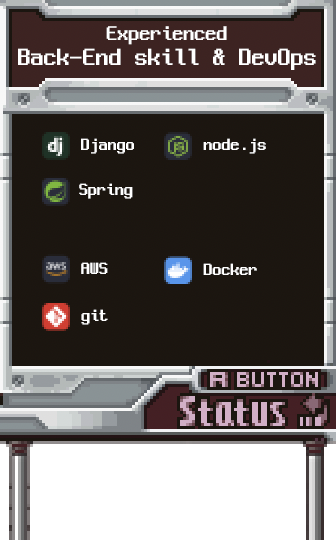
<style>
.page{position:relative;width:336px;height:540px}
.page>*{position:absolute;margin:0}
.t1{font:26px/30px "NeoDunggeunmo-Regular";color:#ffffff}
.t2{font:22px/22px "NeoDunggeunmo-Regular";color:#ffffff}
.t3{font:18px "NeoDunggeunmo-Regular";color:#ffffff}
</style>
<div class="page">
<p class="t1" style="left:18px;top:26px;width:298px;height:44px;text-align:center"><span class="t2">Experienced<br></span>Back-End skill &amp; DevOps</p>
<p class="t3" style="left:81px;top:138px;width:53px;height:16px">Django</p>
<p class="t3" style="left:203px;top:138px;width:63px;height:16px">node.js</p>
<p class="t3" style="left:79px;top:183px;width:54px;height:16px">Spring</p>
<p class="t3" style="left:81px;top:262px;width:27px;height:12px">AWS</p>
<p class="t3" style="left:203px;top:263px;width:54px;height:12px">Docker</p>
<p class="t3" style="left:81px;top:309px;width:27px;height:16px">git</p>
</div>
